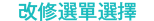
<style>
.page{position:relative;width:154px;height:21px;background:#ffffff}
.page>*{position:absolute;margin:0}
.t1{font:20px "GothicMB101Pr6N-Medium";color:#1cbcbe}
</style>
<div class="page">
<p class="t1" style="left:18px;top:1px;width:119px;height:20px">改修選單選擇</p>
</div>
